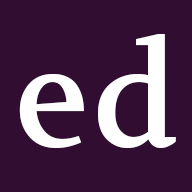
<style>
.page{position:relative;width:192px;height:192px;background:#310e31}
.page>*{position:absolute;margin:0}
.t1{font:140px "Volkhov-Regular";color:#ffffff}
</style>
<div class="page">
<p class="t1" style="left:98px;top:34px;width:78px;height:114px">d</p>
<p class="t1" style="left:19px;top:74px;width:65px;height:74px">e</p>
</div>
